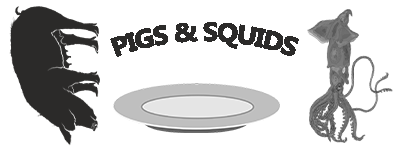
<style>
.page{position:relative;width:400px;height:150px;background:#ffffff}
.page>*{position:absolute;margin:0}
.t1{font:25.7px "Ebrima-Bold";letter-spacing:-0.04em;color:#2b2a29;scale:0.88 1}
</style>
<div class="page">
<p class="t1" style="left:110px;top:22px;width:189px;height:35px">PIGS &amp; SQUIDS</p>
</div>
